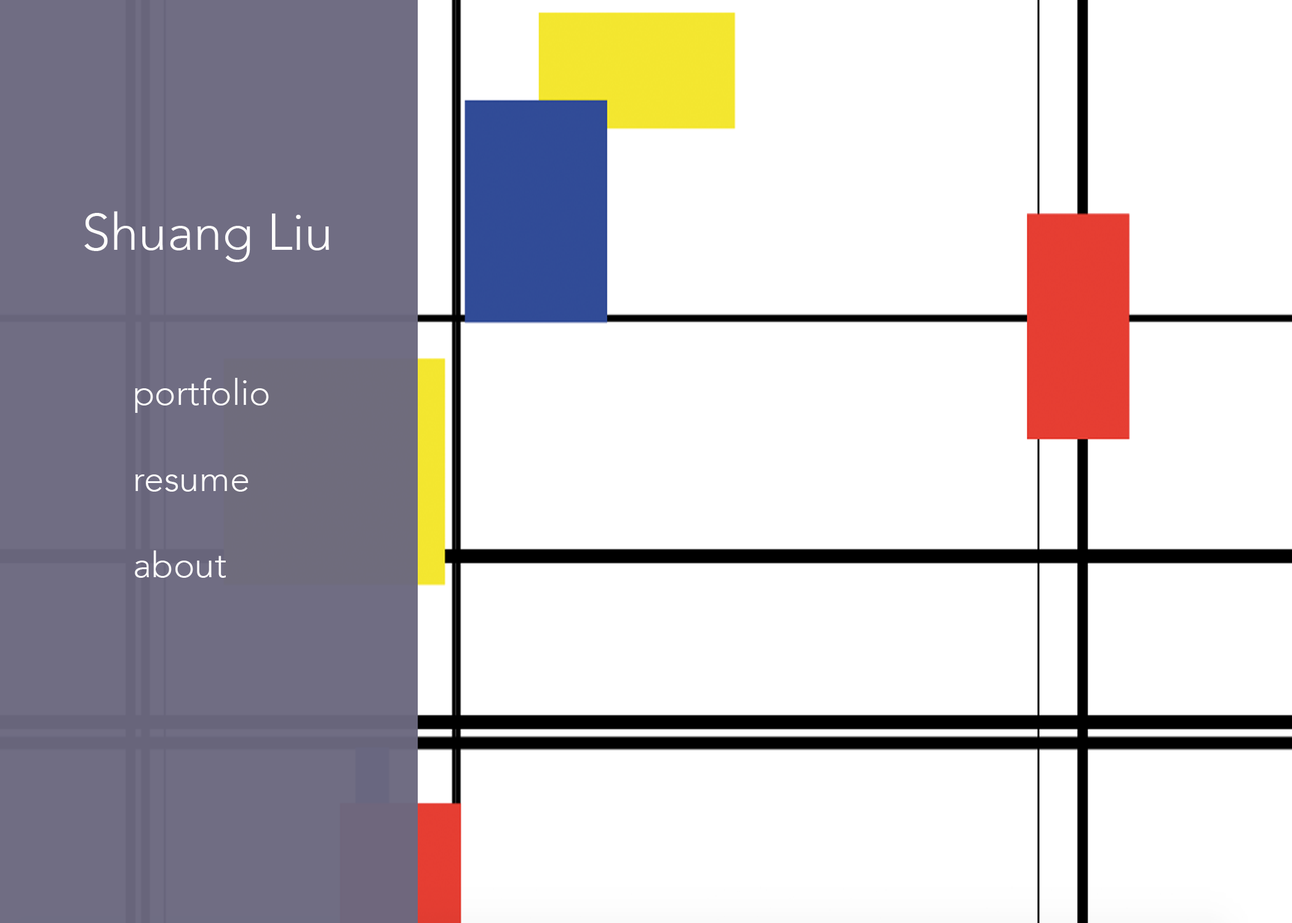
<style>
.page{position:relative;width:1292px;height:923px;background:#ffffff}
.page>*{position:absolute;margin:0}
.t1{font:51.3px "Avenir-Light";color:#fdfcfc}
.t2{font:35.9px "Avenir-Light";color:#fdfcfc}
</style>
<div class="page">
<p class="t1" style="left:84px;top:211px;width:245px;height:51px">Shuang Liu</p>
<p class="t2" style="left:135px;top:378px;width:134px;height:200px">portfolio<br><br>resume<br><br>about</p>
</div>
